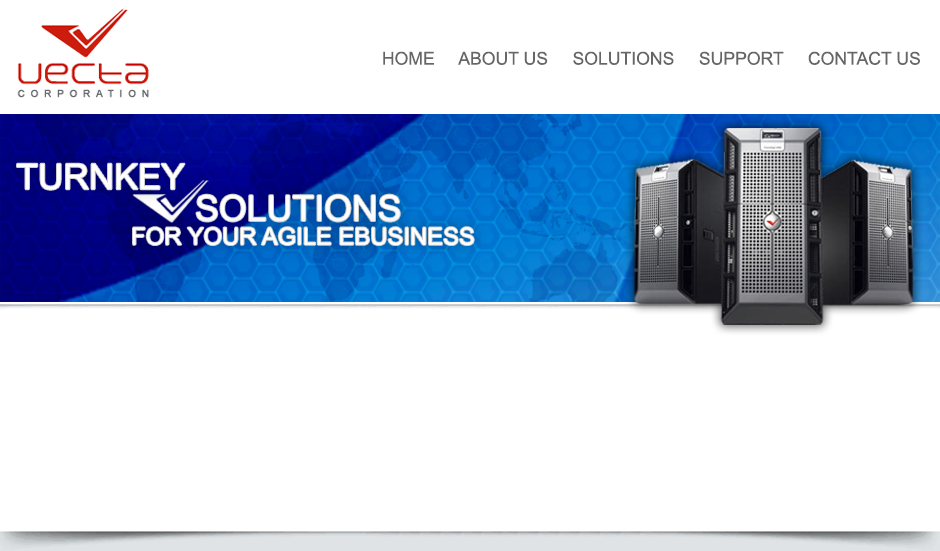
<style>
.page{position:relative;width:940px;height:551px;background:#ffffff}
.page>*{position:absolute;margin:0}
.t1{font:17.6px "ArialMT";color:#666666;text-transform:uppercase}
.t2{font:35.7px/11.9px "ArialMT";color:#ffffff;text-transform:uppercase}
.t3{font:23.8px/0px "ArialMT";color:#ffffff;text-transform:uppercase}
.t4{font:35.2px/0px "ArialMT";color:#ffffff;text-transform:uppercase}
.t5{font:23.8px "ArialMT";color:#ffffff;text-transform:uppercase}
</style>
<div class="page">
<p class="t1" style="left:383px;top:51px;width:537px;height:14px">HOME     ABOUT US     SOLUTIONS     SUPPORT     CONTACT US</p>
<p class="t2" style="left:17px;top:163px;width:383px;height:59px;text-align:justify"><span class="t3"> </span><span class="t4">Turnkey <br>                </span>        solutions</p>
<p class="t5" style="left:133px;top:227px;width:341px;height:18px">for your agile ebusiness</p>
</div>
